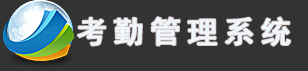
<style>
.page{position:relative;width:308px;height:71px;background:#333333}
.page>*{position:absolute;margin:0}
.t1{font:30px "SimHei";letter-spacing:0.2em;color:#f0f7fc;font-weight:bold}
</style>
<div class="page">
<p class="t1" style="left:77px;top:17px;width:214px;height:29px">考勤管理系统</p>
</div>
